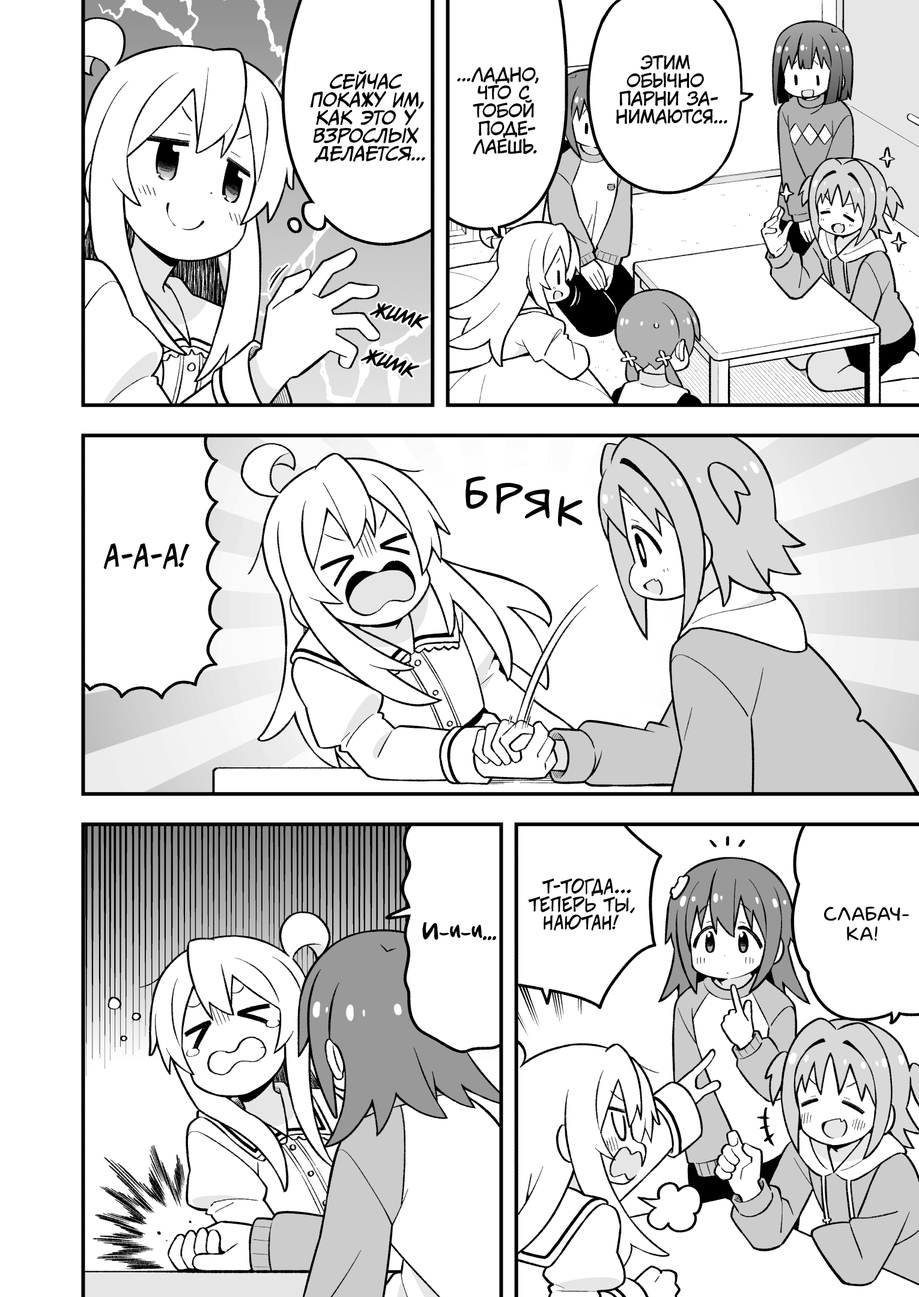
<style>
.page{position:relative;width:919px;height:1297px;background:#ffffff}
.page>*{position:absolute;margin:0}
.t1{font:18px "KuraiVoice2";color:#000000;text-transform:uppercase}
.t2{font:18px "CCMeanwhile";color:#000000;text-transform:uppercase;font-style:italic}
.t3{font:25.2px "v_CCDearDiary";color:#000000}
.t4{font:50.5px "v_MangaMasterBB";color:#000000}
.t5{font:28.8px "v_CCJeffCampbell";color:#000000;text-transform:uppercase}
.t6{font:18px "v_CCJeffCampbell";color:#000000;text-transform:uppercase}
.t7{font:19.8px "laCartoonerie";color:#000000;text-transform:uppercase}
.t8{font:21.6px "AkbarPlain";color:#000000}
</style>
<div class="page">
<p class="t1" style="left:616px;top:55px;width:111px;height:69px;text-align:center">Этим<br>обычно<br>парни за-<br>нимаются...</p>
<p class="t2" style="left:311px;top:70px;width:114px;height:93px;text-align:center">Сейчас<br>покажу им,<br>как это у<br>взрослых<br>делается...</p>
<p class="t1" style="left:457px;top:67px;width:82px;height:87px;text-align:center">...Ладно,<br>что с<br>тобой<br>поде-<br>лаешь.</p>
<p class="t3" style="left:369px;top:303px;width:60px;height:26px;rotate:15deg">жимк</p>
<p class="t3" style="left:360px;top:349px;width:59px;height:29px;rotate:19deg">жимк</p>
<p class="t4" style="left:466px;top:476px;width:22px;height:33px;rotate:2deg">б</p>
<p class="t4" style="left:496px;top:483px;width:27px;height:31px;rotate:6deg">р</p>
<p class="t4" style="left:524px;top:490px;width:26px;height:29px;rotate:4deg">я</p>
<p class="t4" style="left:558px;top:496px;width:25px;height:31px;rotate:7deg">к</p>
<p class="t5" style="left:103px;top:544px;width:87px;height:25px">А-а-а!</p>
<p class="t6" style="left:528px;top:879px;width:107px;height:52px;text-align:center">Т-тогда...<br>теперь ты,<br>Наютан!</p>
<p class="t7" style="left:824px;top:907px;width:85px;height:34px;text-align:center">Слабач-<br>ка!</p>
<p class="t8" style="left:422px;top:922px;width:74px;height:19px">И-и-и...</p>
</div>
